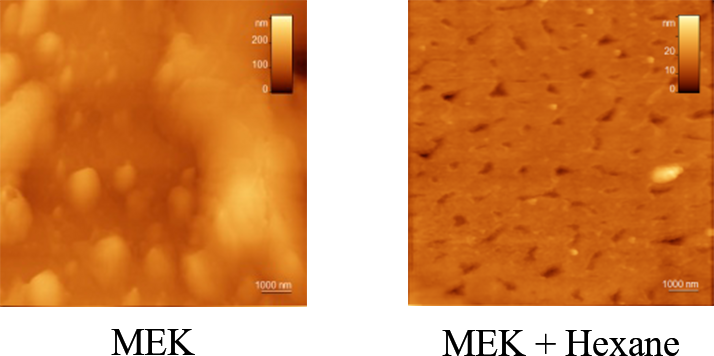
<style>
.page{position:relative;width:714px;height:356px;background:#ffffff}
.page>*{position:absolute;margin:0}
.t1{font:37.5px "TimesNewRomanPSMT";color:#000000}
</style>
<div class="page">
<p class="t1" style="left:111px;top:329px;width:84px;height:26px">MEK</p>
<p class="t1" style="left:442px;top:330px;width:237px;height:26px">MEK + Hexane</p>
</div>
